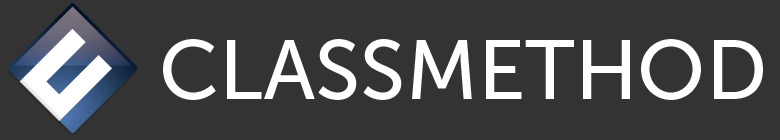
<style>
.page{position:relative;width:780px;height:140px;background:#333333}
.page>*{position:absolute;margin:0}
.t1{font:83px "MuseoSans-500";color:#ffffff}
</style>
<div class="page">
<p class="t1" style="left:163px;top:39px;width:600px;height:61px">CLASSMETHOD</p>
</div>
